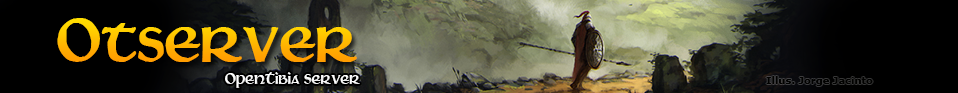
<style>
.page{position:relative;width:958px;height:93px;background:#000000}
.page>*{position:absolute;margin:0}
.t1{font:72px "Martel"}
.t2{font:18px "Martel";color:#ffffff}
.t3{font:10px "Verdana-Bold";color:#010100}
</style>
<div class="page">
<p class="t1" style="left:57px;top:18px;width:300px;height:44px">Otserver</p>
<p class="t2" style="left:225px;top:72px;width:135px;height:16px">OpenTibia Server</p>
<p class="t3" style="left:766px;top:76px;width:107px;height:10px">Illus. Jorge Jacinto</p>
</div>
